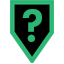
<style>
.page{position:relative;width:64px;height:64px;background:#ffffff}
.page>*{position:absolute;margin:0}
.t1{font:46.6px "FuturaPT-Demi";color:#2cb674}
</style>
<div class="page">
<p class="t1" style="left:22px;top:9px;width:20px;height:33px">?</p>
</div>
